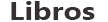
<style>
.page{position:relative;width:108px;height:22px;background:#ffffff}
.page>*{position:absolute;margin:0}
.t1{font:26.3px "MicrosoftNewTaiLue-Bold";color:#363131;scale:1.14 1}
</style>
<div class="page">
<p class="t1" style="left:11px;top:1px;width:84px;height:19px">Libros</p>
</div>
